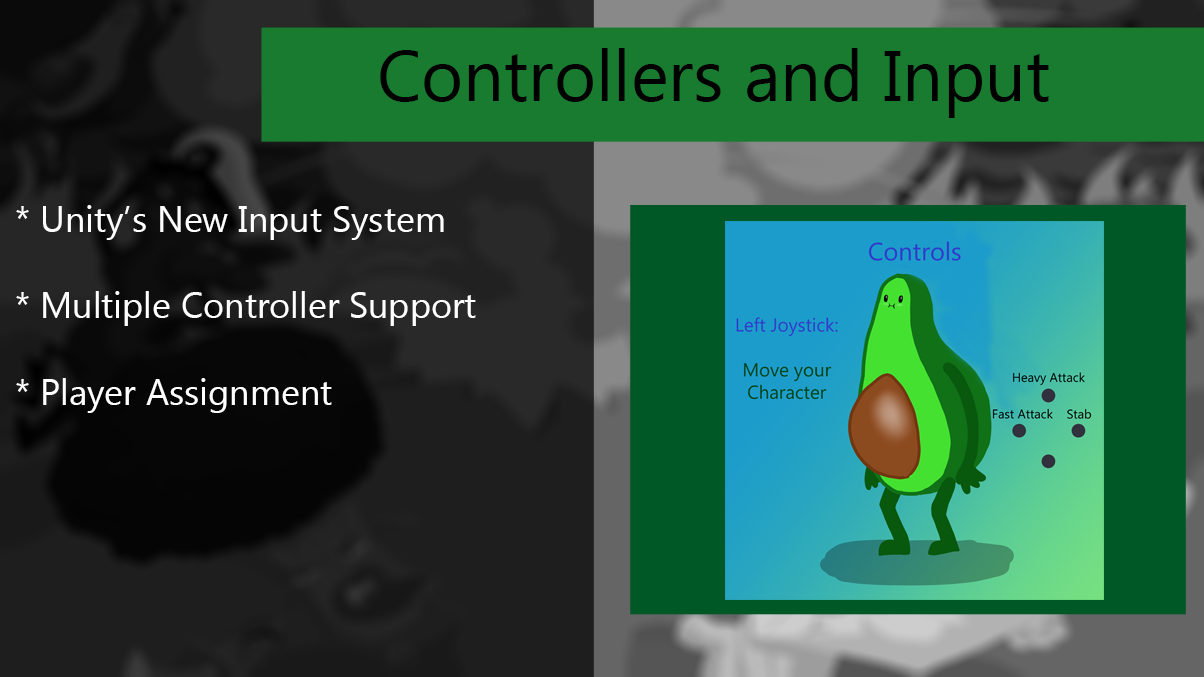
<style>
.page{position:relative;width:1204px;height:677px}
.page>*{position:absolute;margin:0}
.t1{font:72px "Gadugi";color:#000000}
.t2{font:36px "Gadugi";color:#ffffff}
</style>
<div class="page">
<p class="t1" style="left:380px;top:48px;width:669px;height:70px">Controllers and Input</p>
<p class="t2" style="left:16px;top:205px;width:460px;height:208px">* Unity’s New Input System<br><br>* Multiple Controller Support<br><br>* Player Assignment</p>
</div>
